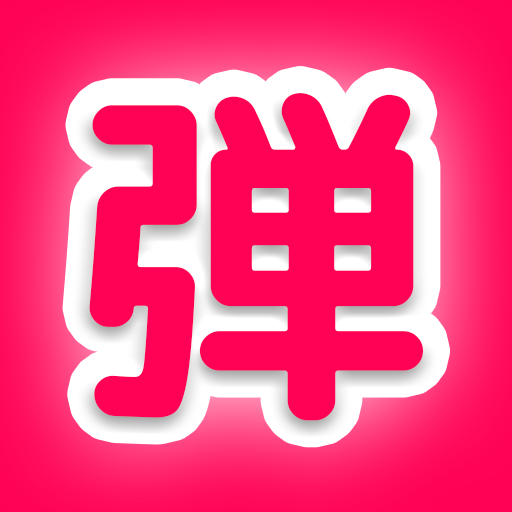
<style>
.page{position:relative;width:512px;height:512px;background:#ff0255}
.page>*{position:absolute;margin:0}
.t1{font:358.3px "RoundedMplus1c-Bold";color:#ff0255}
</style>
<div class="page">
<p class="t1" style="left:89px;top:93px;width:334px;height:328px">弾</p>
</div>
